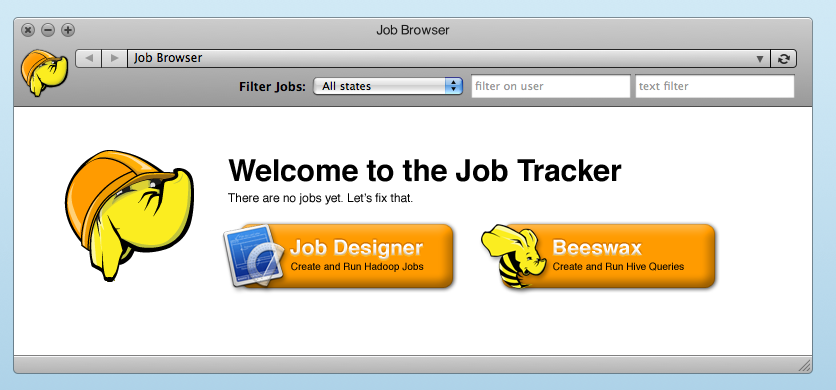
<style>
.page{position:relative;width:836px;height:390px;background:#ffffff}
.page>*{position:absolute;margin:0}
.t1{font:12px/21px "Helvetica";color:#000000}
.t2{font:30px "Helvetica-Bold";color:#000000}
.t3{font:21px "Helvetica-Bold";color:#ffffff}
.t4{font:10px "Helvetica";color:#000000}
</style>
<div class="page">
<p class="t1" style="left:228px;top:159px;width:394px;height:46px"><span class="t2">Welcome to the Job Tracker<br></span>There are no jobs yet. Let’s fix that.</p>
<p class="t3" style="left:290px;top:239px;width:133px;height:21px">Job Designer</p>
<p class="t3" style="left:553px;top:239px;width:89px;height:17px">Beeswax</p>
<p class="t4" style="left:291px;top:262px;width:133px;height:10px">Create and Run Hadoop Jobs</p>
<p class="t4" style="left:553px;top:262px;width:131px;height:9px">Create and Run Hive Queries</p>
</div>
